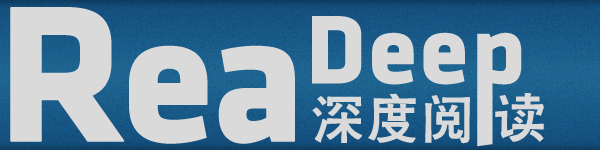
<style>
.page{position:relative;width:600px;height:150px;background:#dadada}
.page>*{position:absolute;margin:0}
.t1{font:190px "KlavikaBold-BoldOSTF";letter-spacing:-0.05em;color:#dadada;font-weight:bold}
.t2{font:200px "KlavikaBold-BoldOSTF";letter-spacing:-0.05em;color:#dadada;font-weight:bold}
.t3{font:51px "CTCuHeiSJ";letter-spacing:0.05em;color:#dadada;font-weight:bold}
.t4{font:51px "CTCuHeiSJ";color:#dadada;font-weight:bold}
</style>
<div class="page">
<p class="t1" style="left:10px;top:7px;width:285px;height:137px"><span class="t2">R</span>ea</p>
<p class="t3" style="left:312px;top:93px;width:158px;height:51px">深度阅</p>
<p class="t4" style="left:495px;top:93px;width:49px;height:49px">读</p>
</div>
